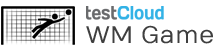
<style>
.page{position:relative;width:219px;height:50px;background:#ffffff}
.page>*{position:absolute;margin:0}
.t1{font:24px "Numans-Regular";letter-spacing:0.01em;color:#3f3f3f}
</style>
<div class="page">
<p class="t1" style="left:86px;top:25px;width:127px;height:19px">WM Game</p>
</div>
